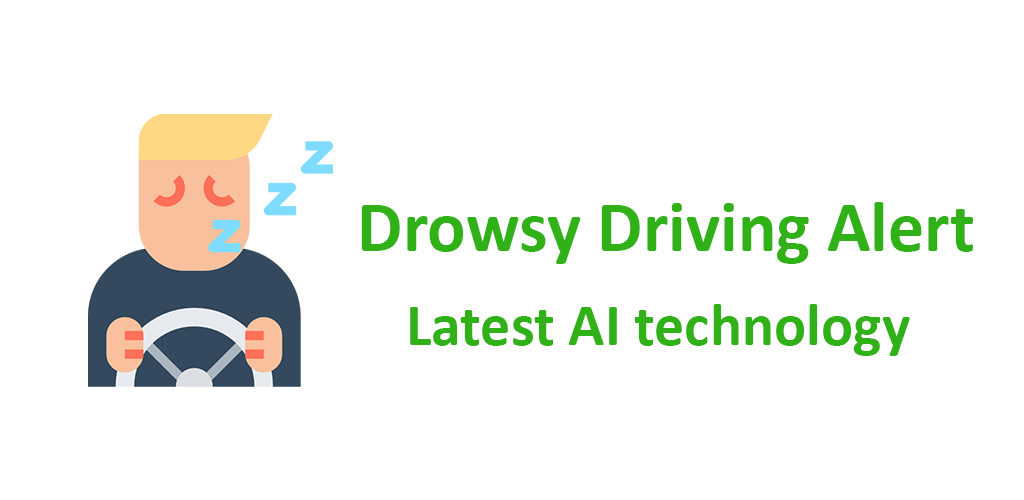
<style>
.page{position:relative;width:1024px;height:500px;background:#ffffff}
.page>*{position:absolute;margin:0}
.t1{font:72px "Calibri-Bold";color:#31b118}
.t2{font:60px "Calibri-Bold";color:#31b118}
</style>
<div class="page">
<p class="t1" style="left:361px;top:202px;width:612px;height:62px">Drowsy Driving Alert</p>
<p class="t2" style="left:410px;top:304px;width:500px;height:52px">Latest AI technology</p>
</div>
